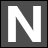
<style>
.page{position:relative;width:48px;height:48px;background:#4d4d4d}
.page>*{position:absolute;margin:0}
.t1{font:50px "SegoeUI-Bold";letter-spacing:-0.04em;color:#ffffff;scale:1.03 1}
</style>
<div class="page">
<p class="t1" style="left:8px;top:6px;width:33px;height:36px">N</p>
</div>
